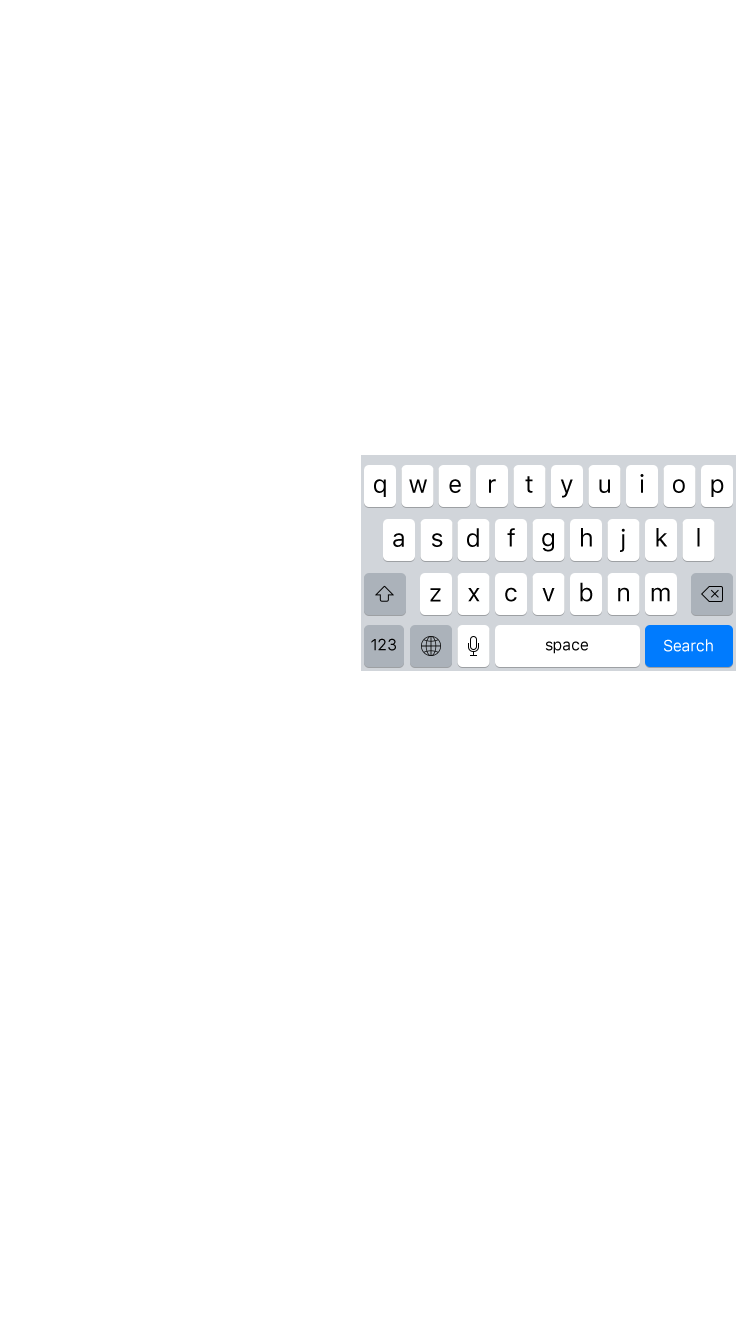
<style>
.page{position:relative;width:750px;height:1334px;background:#ffffff}
.page>*{position:absolute;margin:0}
.t1{font:25px "SFUIText-Regular";color:#000000}
.t2{font:16px "SFUIText-Regular";letter-spacing:-0.02em;color:#000000}
.t3{font:16px "SFUIText-Regular";letter-spacing:-0.02em;color:#ffffff}
</style>
<div class="page">
<p class="t1" style="left:374px;top:479px;width:12px;height:18px">q</p>
<p class="t1" style="left:409px;top:479px;width:18px;height:14px">w</p>
<p class="t1" style="left:449px;top:479px;width:12px;height:14px">e</p>
<p class="t1" style="left:489px;top:479px;width:7px;height:14px">r</p>
<p class="t1" style="left:525px;top:476px;width:8px;height:17px">t</p>
<p class="t1" style="left:560px;top:479px;width:13px;height:19px">y</p>
<p class="t1" style="left:599px;top:479px;width:11px;height:14px">u</p>
<p class="t1" style="left:640px;top:474px;width:4px;height:19px">i</p>
<p class="t1" style="left:673px;top:479px;width:12px;height:14px">o</p>
<p class="t1" style="left:711px;top:479px;width:13px;height:18px">p</p>
<p class="t1" style="left:393px;top:533px;width:11px;height:14px">a</p>
<p class="t1" style="left:432px;top:533px;width:11px;height:14px">s</p>
<p class="t1" style="left:467px;top:528px;width:12px;height:19px">d</p>
<p class="t1" style="left:507px;top:528px;width:8px;height:19px">f</p>
<p class="t1" style="left:542px;top:533px;width:12px;height:19px">g</p>
<p class="t1" style="left:581px;top:528px;width:11px;height:19px">h</p>
<p class="t1" style="left:620px;top:528px;width:5px;height:24px">j</p>
<p class="t1" style="left:656px;top:528px;width:12px;height:19px">k</p>
<p class="t1" style="left:697px;top:528px;width:3px;height:19px">l</p>
<p class="t1" style="left:580px;top:582px;width:13px;height:20px">b</p>
<p class="t1" style="left:430px;top:588px;width:11px;height:14px">z</p>
<p class="t1" style="left:468px;top:588px;width:12px;height:14px">x</p>
<p class="t1" style="left:505px;top:587px;width:12px;height:15px">c</p>
<p class="t1" style="left:542px;top:588px;width:13px;height:14px">v</p>
<p class="t1" style="left:618px;top:587px;width:11px;height:15px">n</p>
<p class="t1" style="left:651px;top:587px;width:19px;height:15px">m</p>
<p class="t2" style="left:371px;top:638px;width:25px;height:13px">123</p>
<p class="t2" style="left:545px;top:641px;width:43px;height:13px">space</p>
<p class="t3" style="left:664px;top:639px;width:49px;height:13px">Search</p>
</div>
